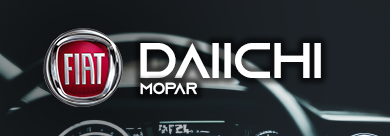
<style>
.page{position:relative;width:390px;height:136px}
.page>*{position:absolute;margin:0}
.t1{font:50px "AzonixRegular";color:#ffffff}
.t2{font:16px "AzonixRegular";color:#ffffff}
</style>
<div class="page">
<p class="t1" style="left:140px;top:43px;width:181px;height:35px">Daiichi</p>
<p class="t2" style="left:140px;top:82px;width:57px;height:13px">mopar</p>
</div>
